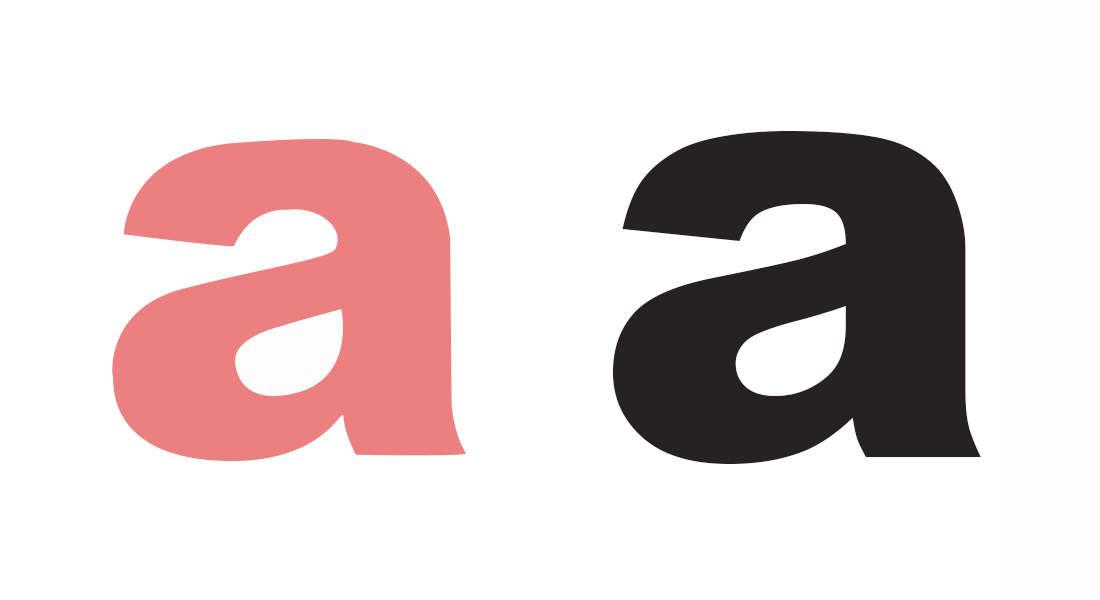
<style>
.page{position:relative;width:1100px;height:600px;background:#ffffff}
.page>*{position:absolute;margin:0}
.t1{font:616.3px "Arial-Black";color:#262222}
</style>
<div class="page">
<p class="t1" style="left:612px;top:131px;width:369px;height:333px">a</p>
</div>
